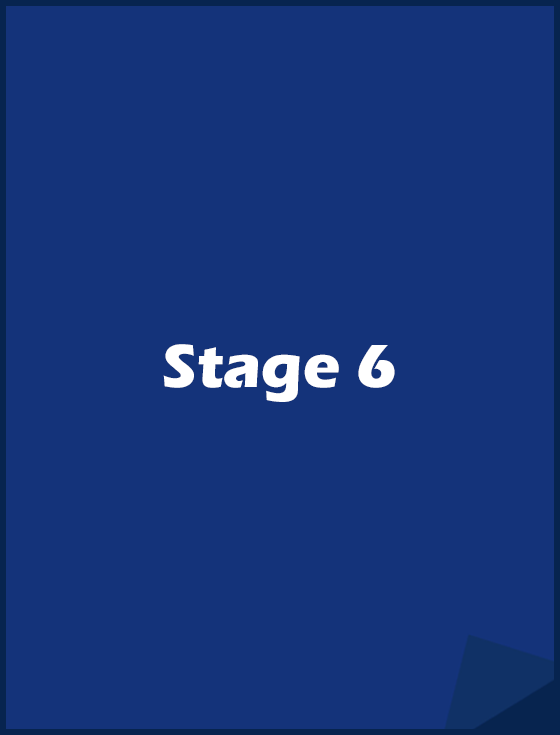
<style>
.page{position:relative;width:560px;height:735px;background:#14337a}
.page>*{position:absolute;margin:0}
.t1{font:62.9px "ErasITC-Bold";color:#ffffff}
</style>
<div class="page">
<p class="t1" style="left:163px;top:344px;width:232px;height:58px;rotate:11deg">Stage 6</p>
</div>
